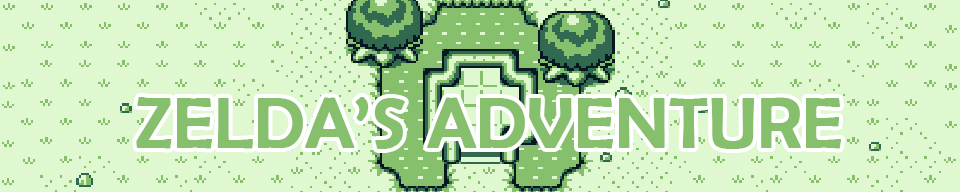
<style>
.page{position:relative;width:960px;height:192px;background:#e0f8cf}
.page>*{position:absolute;margin:0}
.t1{font:71.7px "BerlinSansFB-Reg";color:#86c06c;font-weight:bold}
</style>
<div class="page">
<p class="t1" style="left:136px;top:97px;width:705px;height:52px">ZELDA’S ADVENTURE</p>
</div>
